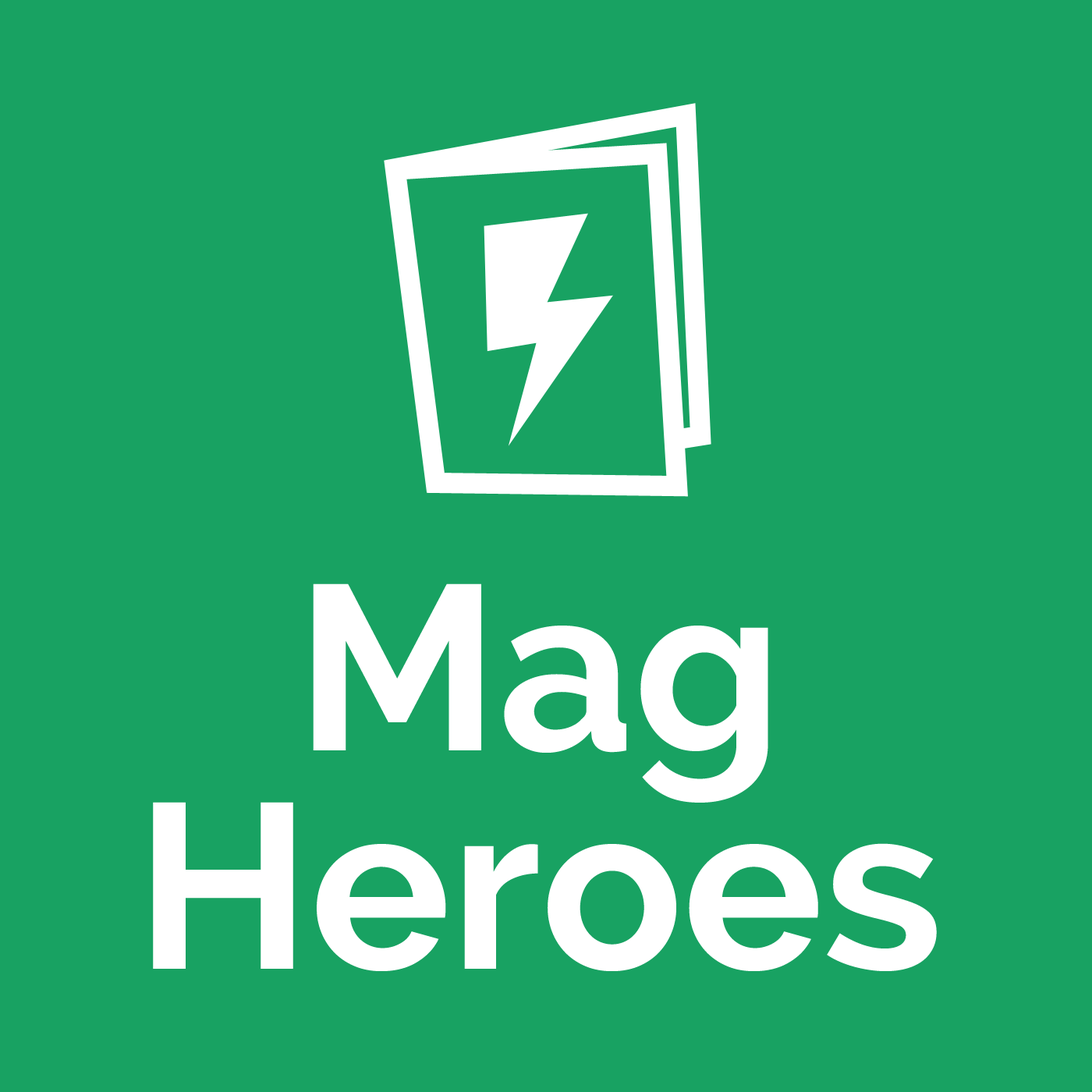
<style>
.page{position:relative;width:1092px;height:1092px;background:#18a262}
.page>*{position:absolute;margin:0}
.t1{font:234px "Raleway-Bold";color:#ffffff}
</style>
<div class="page">
<p class="t1" style="left:153px;top:583px;width:784px;height:388px">Mag   Heroes</p>
</div>
